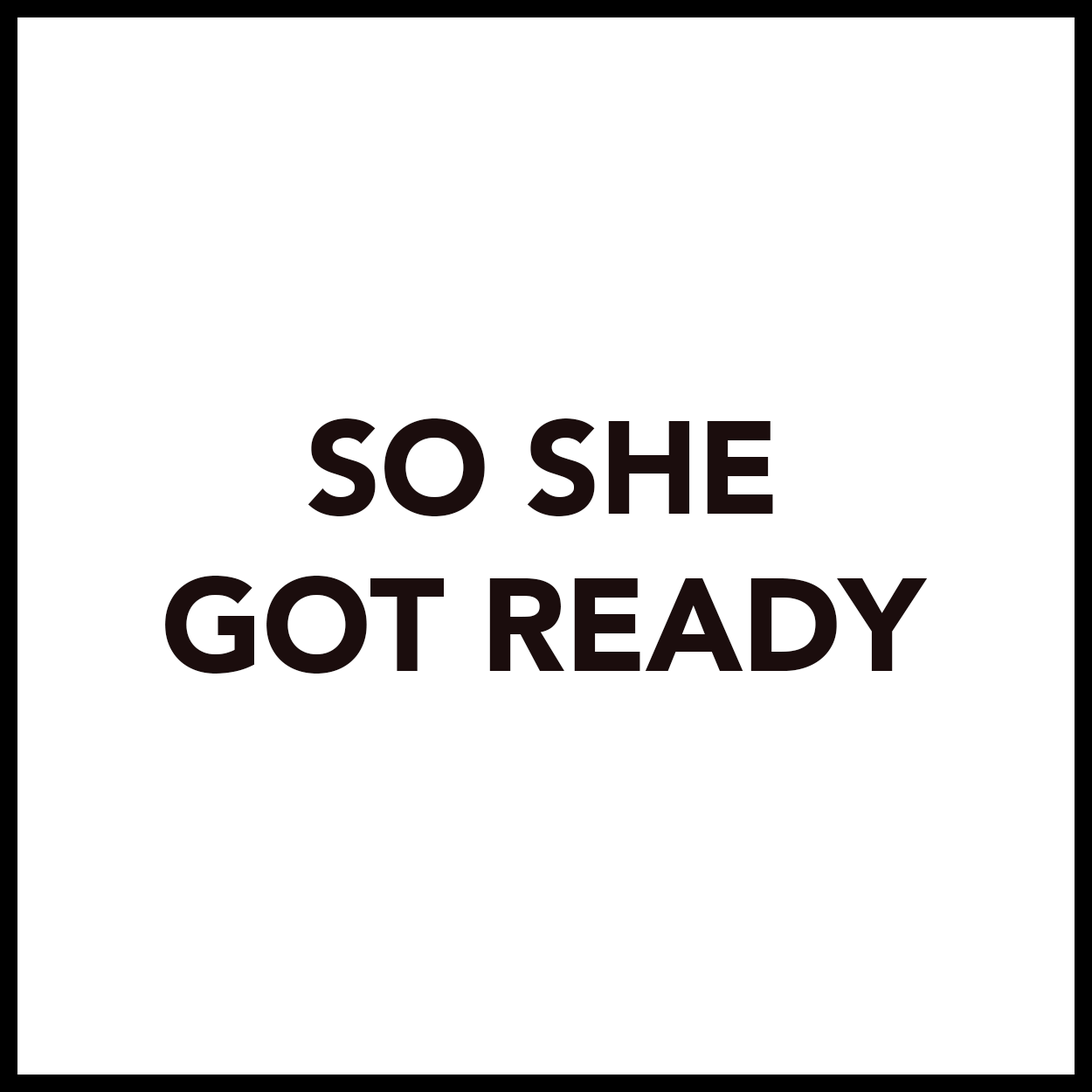
<style>
.page{position:relative;width:1092px;height:1092px;background:#ffffff}
.page>*{position:absolute;margin:0}
.t1{font:131px "Avenir-Black";letter-spacing:-0.01em;color:#1b0d0d}
</style>
<div class="page">
<p class="t1" style="left:165px;top:418px;width:763px;height:256px;text-align:center">SO SHE<br>GOT READY</p>
</div>
